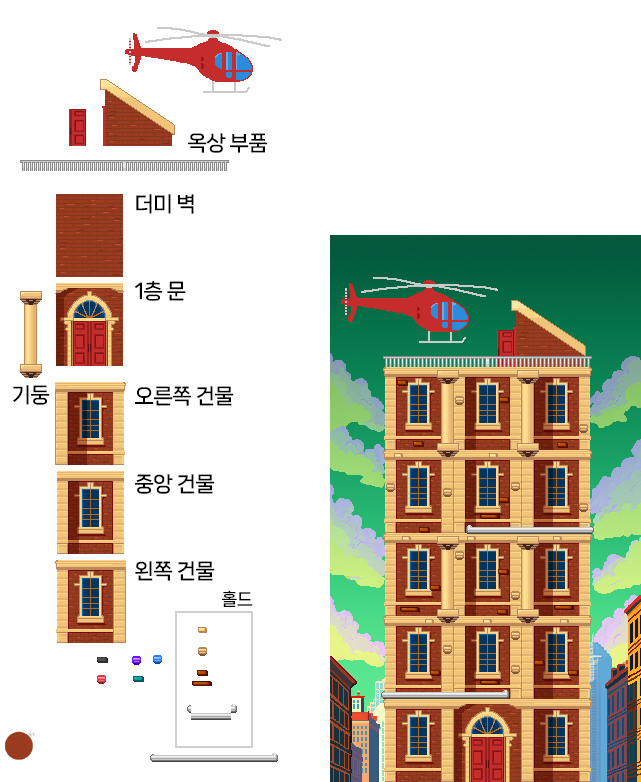
<style>
.page{position:relative;width:641px;height:782px;background:#ffffff}
.page>*{position:absolute;margin:0}
.t1{font:20.8px "NanumSquareNeoTTF-cBd";letter-spacing:-0.04em;color:#000000}
.t2{font:17px "NanumSquareNeoTTF-cBd";letter-spacing:-0.04em;color:#000000}
</style>
<div class="page">
<p class="t1" style="left:188px;top:133px;width:80px;height:20px">옥상 부품</p>
<p class="t1" style="left:136px;top:194px;width:58px;height:20px">더미 벽</p>
<p class="t1" style="left:135px;top:281px;width:51px;height:20px">1층 문</p>
<p class="t1" style="left:13px;top:385px;width:37px;height:20px">기둥</p>
<p class="t1" style="left:135px;top:386px;width:99px;height:20px">오른쪽 건물</p>
<p class="t1" style="left:135px;top:474px;width:80px;height:20px">중앙 건물</p>
<p class="t1" style="left:135px;top:561px;width:80px;height:20px">왼쪽 건물</p>
<p class="t2" style="left:222px;top:590px;width:31px;height:17px">홀드</p>
</div>
